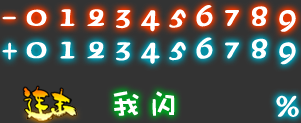
<style>
.page{position:relative;width:301px;height:123px;background:#333333}
.page>*{position:absolute;margin:0}
.t1{font:37.8px "JSaoEr";letter-spacing:0.23em;color:#ffffff}
.t2{font:30.4px "DFPWaWaW5";letter-spacing:0.2em;color:#ffffff;font-weight:bold}
.t3{font:32.9px "JSaoEr";letter-spacing:0.23em;color:#ffffff}
</style>
<div class="page">
<p class="t1" style="left:2px;top:5px;width:294px;height:27px">-0123456789</p>
<p class="t1" style="left:2px;top:37px;width:294px;height:28px">+0123456789</p>
<p class="t2" style="left:113px;top:91px;width:62px;height:25px">我闪</p>
<p class="t3" style="left:276px;top:95px;width:23px;height:22px">%</p>
</div>
